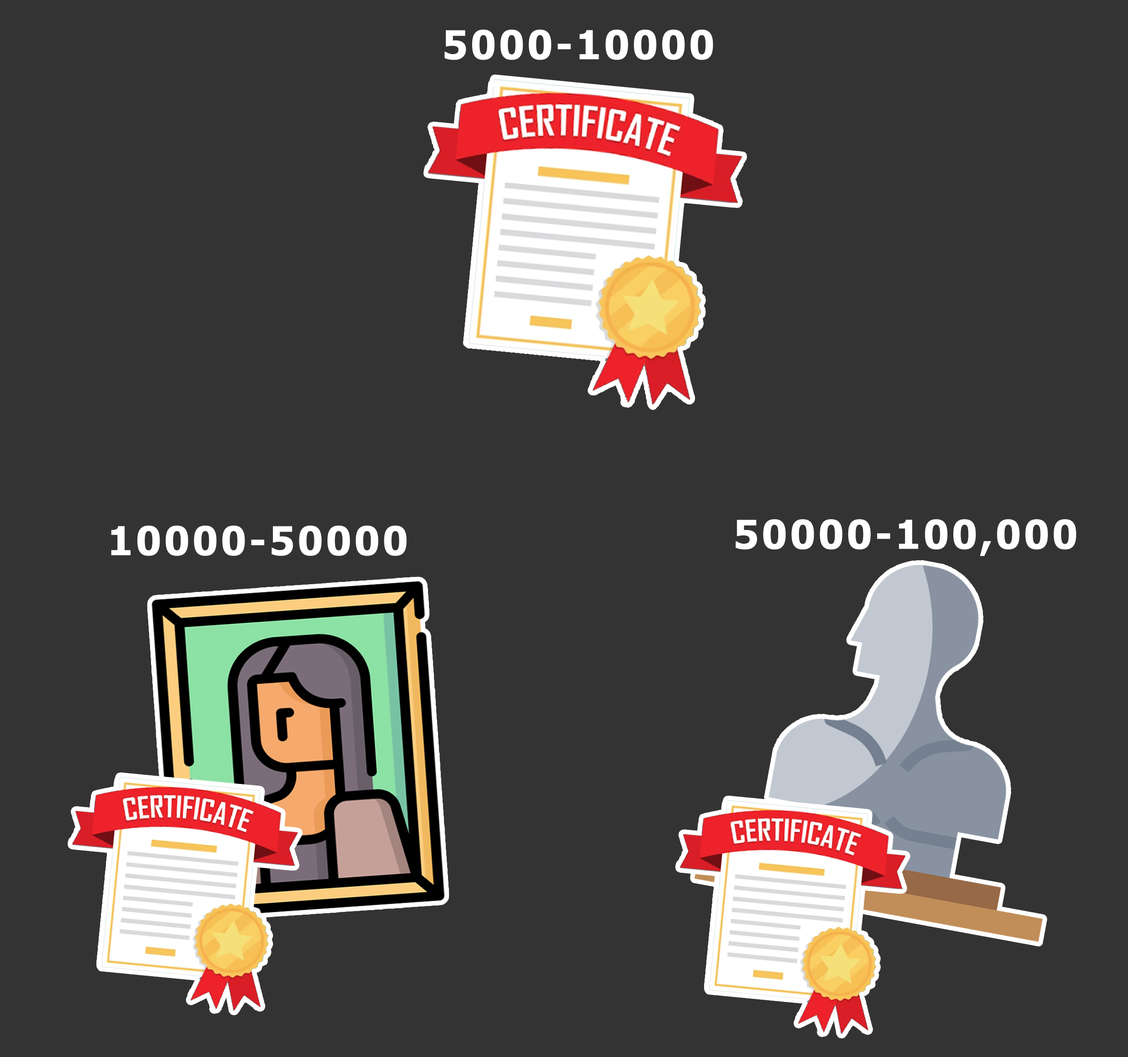
<style>
.page{position:relative;width:1128px;height:1057px;background:#333333}
.page>*{position:absolute;margin:0}
.t1{font:39.8px "Tahoma-Bold";letter-spacing:0.075em;color:#ffffff}
</style>
<div class="page">
<p class="t1" style="left:444px;top:30px;width:269px;height:30px">5000-10000</p>
<p class="t1" style="left:736px;top:519px;width:340px;height:37px">50000-100,000</p>
<p class="t1" style="left:111px;top:525px;width:296px;height:31px">10000-50000</p>
</div>
